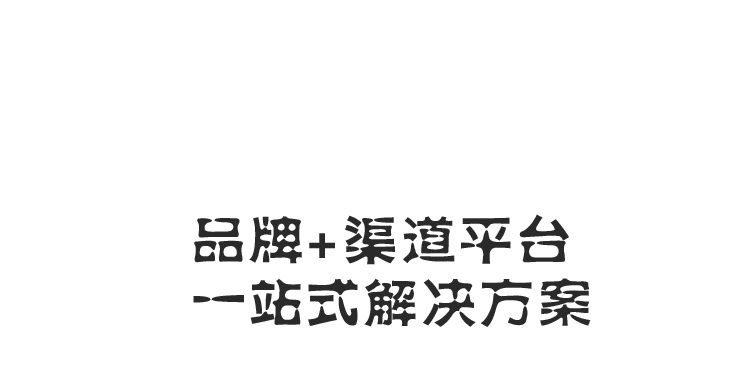
<style>
.page{position:relative;width:734px;height:365px;background:#ffffff}
.page>*{position:absolute;margin:0}
.t1{font:51.8px/62.2px "FZSHHJW--GB1-0";letter-spacing:0.075em;color:#2a2a2a;scale:1.04 1}
</style>
<div class="page">
<p class="t1" style="left:193px;top:214px;width:398px;height:113px">品牌+渠道平台<br>一站式解决方案</p>
</div>
